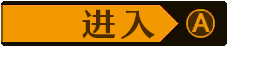
<style>
.page{position:relative;width:256px;height:64px;background:#ffffff}
.page>*{position:absolute;margin:0}
.t1{font:32px "FZYASHS_ZHONG--GB1-0";letter-spacing:0.125em;color:#4c2b02;scale:1.1 1}
.t2{font:32px "SkipStd-B";letter-spacing:0.125em;color:#4c2b02;scale:1.1 1}
</style>
<div class="page">
<p class="t1" style="left:82px;top:9px;width:73px;height:30px">进<span class="t2">入</span></p>
</div>
